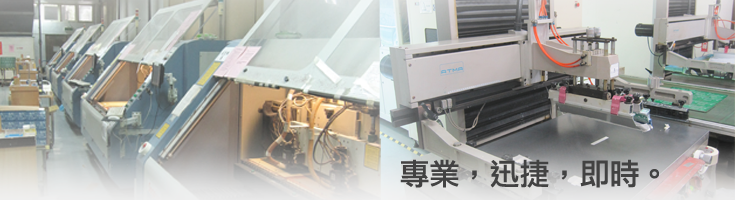
<style>
.page{position:relative;width:735px;height:200px}
.page>*{position:absolute;margin:0}
.t1{font:30px "LiGothicMed";color:#424242}
</style>
<div class="page">
<p class="t1" style="left:400px;top:159px;width:259px;height:29px">專業，迅捷，即時。</p>
</div>
